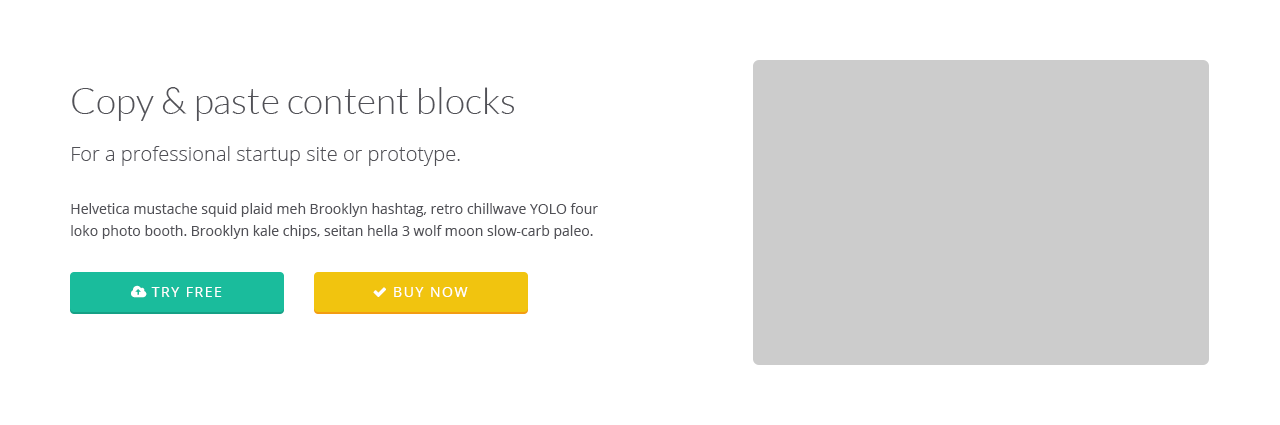
<style>
.page{position:relative;width:1280px;height:425px;background:#ffffff}
.page>*{position:absolute;margin:0}
.t1{font:37px "Lato-Light";color:#515157}
.t2{font:20px "OpenSans-Light";color:#515157}
.t3{font:14px/22px "OpenSans";color:#515157}
</style>
<div class="page">
<p class="t1" style="left:72px;top:87px;width:442px;height:34px">Copy &amp; paste content blocks</p>
<p class="t2" style="left:72px;top:146px;width:388px;height:20px">For a professional startup site or prototype.</p>
<p class="t3" style="left:71px;top:203px;width:527px;height:36px">Helvetica mustache squid plaid meh Brooklyn hashtag, retro chillwave YOLO four loko photo booth. Brooklyn kale chips, seitan hella 3 wolf moon slow-carb paleo.</p>
</div>
